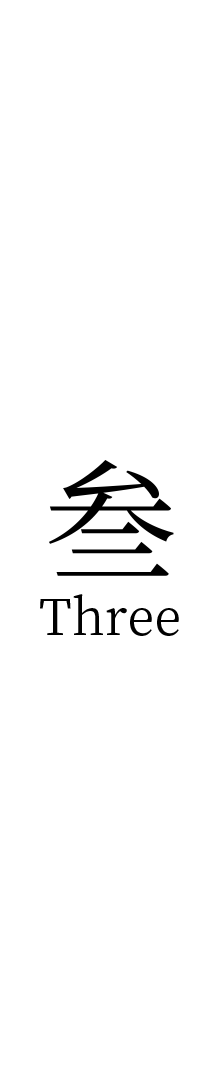
<style>
.page{position:relative;width:216px;height:1080px;background:#ffffff}
.page>*{position:absolute;margin:0}
.t1{font:133.3px "NotoSerifCJKsc-Regular";color:#000000}
.t2{font:50px "NotoSerifCJKsc-Regular";color:#000000}
</style>
<div class="page">
<p class="t1" style="left:48px;top:459px;width:126px;height:117px">叁</p>
<p class="t2" style="left:40px;top:594px;width:139px;height:42px">Three</p>
</div>
